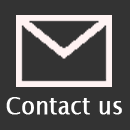
<style>
.page{position:relative;width:130px;height:130px;background:#333333}
.page>*{position:absolute;margin:0}
.t1{font:24px "LucidaSansUnicode";color:#ffffff;font-weight:bold;scale:0.9 1}
</style>
<div class="page">
<p class="t1" style="left:6px;top:97px;width:116px;height:18px">Contact us</p>
</div>
